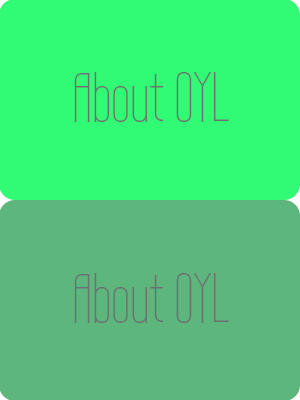
<style>
.page{position:relative;width:300px;height:400px;background:#31fa74}
.page>*{position:absolute;margin:0}
.t1{font:69px "WireOne";color:#6b7072}
</style>
<div class="page">
<p class="t1" style="left:74px;top:72px;width:155px;height:50px">About OYL</p>
<p class="t1" style="left:74px;top:273px;width:155px;height:50px">About OYL</p>
</div>
